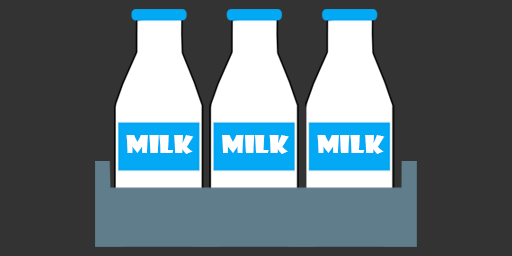
<style>
.page{position:relative;width:512px;height:256px;background:#333333}
.page>*{position:absolute;margin:0}
.t1{font:24.1px "ShowcardGothic-Reg";color:#ffffff;scale:1.13 1}
</style>
<div class="page">
<p class="t1" style="left:126px;top:135px;width:68px;height:19px">MILK</p>
<p class="t1" style="left:222px;top:135px;width:67px;height:19px">MILK</p>
<p class="t1" style="left:317px;top:135px;width:68px;height:19px">MILK</p>
</div>
